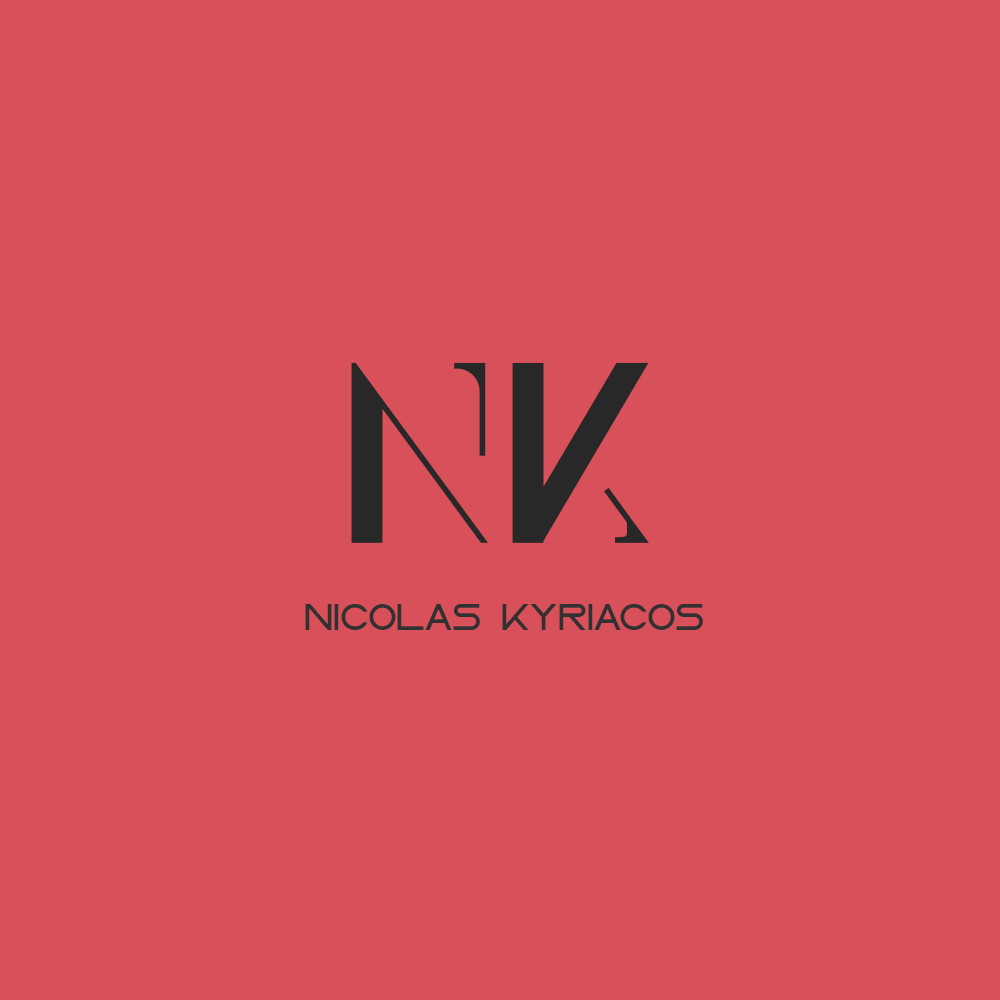
<style>
.page{position:relative;width:1000px;height:1000px;background:#d85059}
.page>*{position:absolute;margin:0}
.t1{font:250px "ElenaRegular";color:#282828}
.t2{font:37.5px "LASER";color:#323131}
</style>
<div class="page">
<p class="t1" style="left:351px;top:362px;width:298px;height:181px">NK</p>
<p class="t2" style="left:305px;top:604px;width:398px;height:26px">Nicolas Kyriacos</p>
</div>
